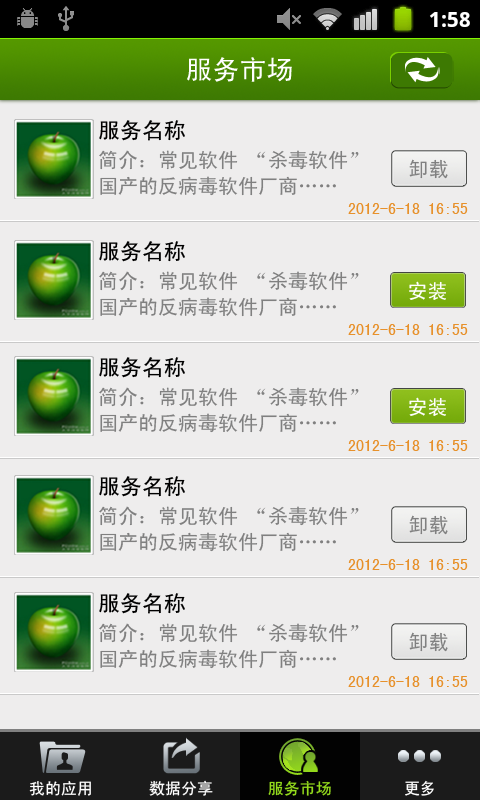
<style>
.page{position:relative;width:480px;height:800px;background:#eeeded}
.page>*{position:absolute;margin:0}
.t1{font:27px "SimHei";color:#ffffff}
.t2{font:22px "SimHei";color:#000000}
.t3{font:20px/26px "SimHei";color:#808080}
.t4{font:20px "SimHei";color:#808080}
.t5{font:16px "SimHei";color:#e7912b}
.t6{font:20px "SimHei";color:#ffffff}
.t7{font:16px "SimHei";color:#ffffff}
.t8{font:16px "SimHei";color:#94db1c}
</style>
<div class="page">
<p class="t1" style="left:187px;top:57px;width:105px;height:25px">服务市场</p>
<p class="t2" style="left:99px;top:120px;width:86px;height:21px">服务名称</p>
<p class="t3" style="left:99px;top:150px;width:260px;height:46px">简介：常见软件 “杀毒软件”<br>国产的反病毒软件厂商……</p>
<p class="t4" style="left:409px;top:159px;width:39px;height:20px">卸载</p>
<p class="t5" style="left:348px;top:203px;width:120px;height:11px">2012-6-18 16:55</p>
<p class="t2" style="left:99px;top:241px;width:86px;height:21px">服务名称</p>
<p class="t3" style="left:99px;top:271px;width:260px;height:46px">简介：常见软件 “杀毒软件”<br>国产的反病毒软件厂商……</p>
<p class="t6" style="left:409px;top:281px;width:37px;height:19px">安装</p>
<p class="t5" style="left:348px;top:324px;width:120px;height:11px">2012-6-18 16:55</p>
<p class="t2" style="left:99px;top:357px;width:86px;height:21px">服务名称</p>
<p class="t3" style="left:99px;top:387px;width:260px;height:46px">简介：常见软件 “杀毒软件”<br>国产的反病毒软件厂商……</p>
<p class="t6" style="left:409px;top:397px;width:37px;height:19px">安装</p>
<p class="t5" style="left:348px;top:440px;width:120px;height:11px">2012-6-18 16:55</p>
<p class="t2" style="left:99px;top:476px;width:86px;height:21px">服务名称</p>
<p class="t3" style="left:99px;top:506px;width:260px;height:46px">简介：常见软件 “杀毒软件”<br>国产的反病毒软件厂商……</p>
<p class="t4" style="left:409px;top:515px;width:39px;height:20px">卸载</p>
<p class="t5" style="left:348px;top:559px;width:120px;height:11px">2012-6-18 16:55</p>
<p class="t2" style="left:99px;top:593px;width:86px;height:21px">服务名称</p>
<p class="t3" style="left:99px;top:623px;width:260px;height:46px">简介：常见软件 “杀毒软件”<br>国产的反病毒软件厂商……</p>
<p class="t4" style="left:409px;top:632px;width:39px;height:20px">卸载</p>
<p class="t5" style="left:348px;top:676px;width:120px;height:11px">2012-6-18 16:55</p>
<p class="t7" style="left:29px;top:781px;width:62px;height:15px">我的应用</p>
<p class="t7" style="left:149px;top:780px;width:64px;height:16px">数据分享</p>
<p class="t8" style="left:268px;top:780px;width:63px;height:16px">服务市场</p>
<p class="t7" style="left:405px;top:780px;width:29px;height:16px">更多</p>
</div>
